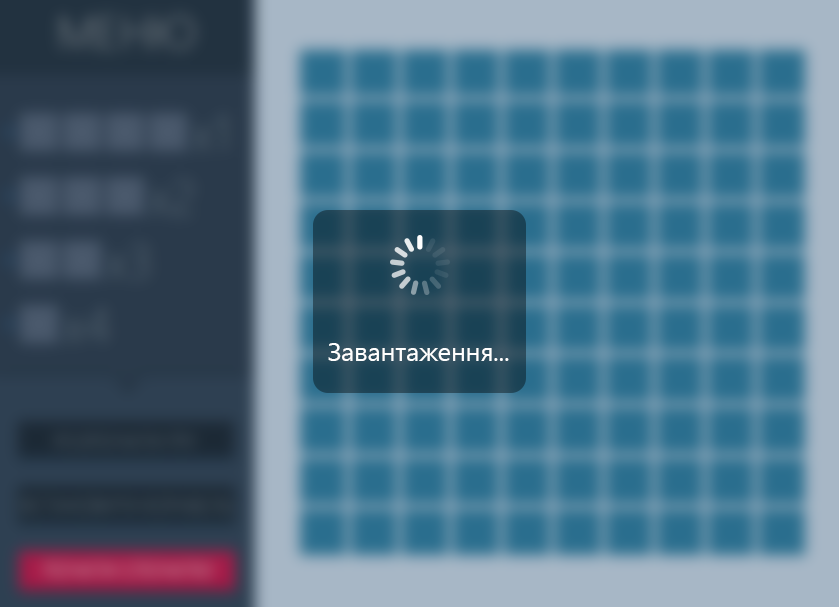
<style>
.page{position:relative;width:839px;height:607px}
.page>*{position:absolute;margin:0}
.t1{font:25.6px "SegoeUI";color:#ffffff}
</style>
<div class="page">
<p class="t1" style="left:328px;top:343px;width:181px;height:18px">Завантаження...</p>
</div>
